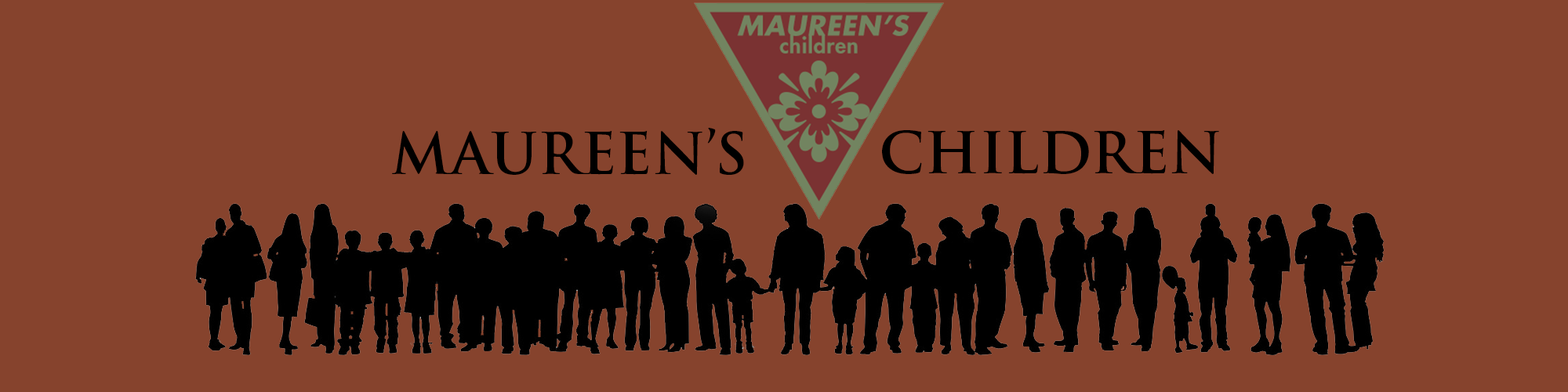
<style>
.page{position:relative;width:1568px;height:392px;background:#86432d}
.page>*{position:absolute;margin:0}
.t1{font:56.4px "TrajanPro-Bold";color:#000000}
</style>
<div class="page">
<p class="t1" style="left:392px;top:128px;width:352px;height:47px">MAUREEN’S</p>
<p class="t1" style="left:882px;top:130px;width:337px;height:44px">CHILDREN</p>
</div>
